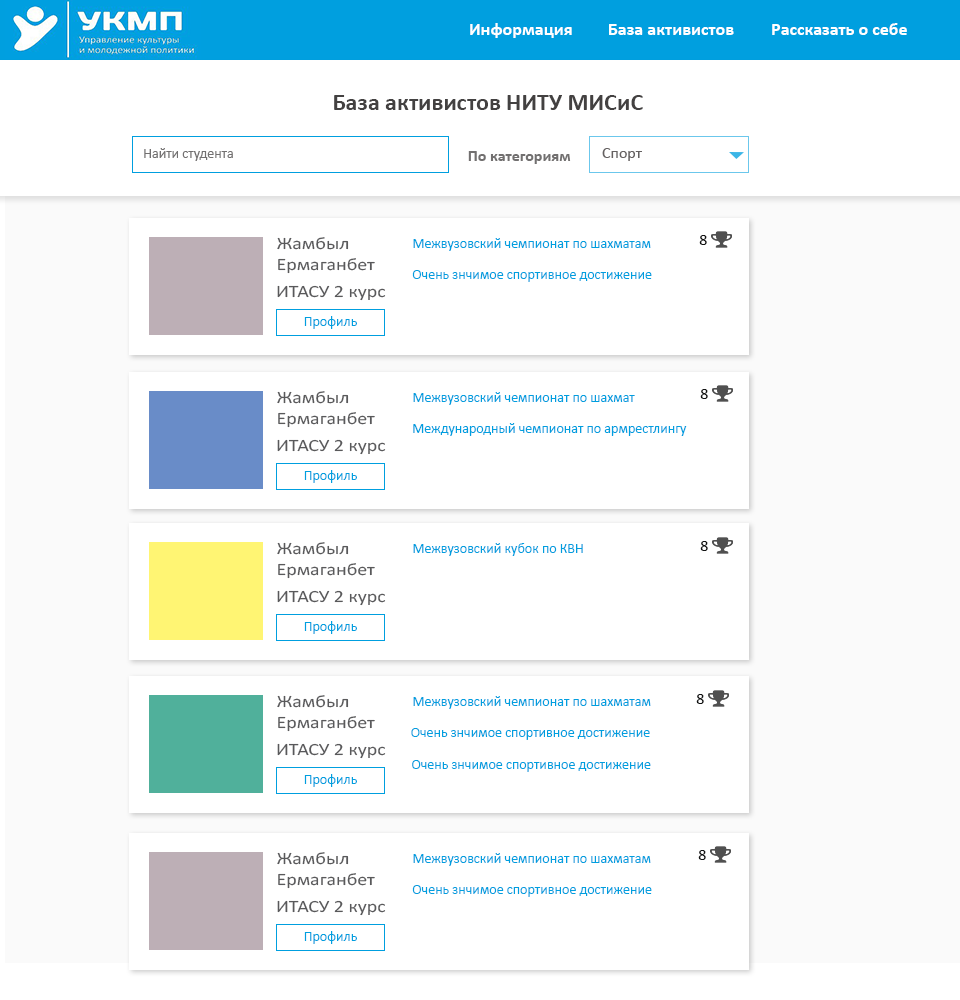
<style>
.page{position:relative;width:960px;height:1000px;background:#ffffff}
.page>*{position:absolute;margin:0}
.t1{font:18px "Calibri-Bold";color:#ffffff}
.t2{font:24px "Calibri-Bold";color:#434141}
.t3{font:14px "Calibri";color:#727070}
.t4{font:16px "Calibri";color:#656161}
.t5{font:16px "Calibri-Bold";color:#727070}
.t6{font:17.2px "Calibri";color:#59595b;scale:1.16 1}
.t7{font:14px "Calibri";color:#009fdf}
.t8{font:16px "Calibri";color:#121313}
</style>
<div class="page">
<p class="t1" style="left:470px;top:23px;width:102px;height:15px">Информация</p>
<p class="t1" style="left:609px;top:24px;width:125px;height:11px">База активистов</p>
<p class="t1" style="left:772px;top:23px;width:135px;height:12px">Рассказать о себе</p>
<p class="t2" style="left:334px;top:95px;width:309px;height:15px">База активистов НИТУ МИСиС</p>
<p class="t3" style="left:144px;top:148px;width:89px;height:13px">Найти студента</p>
<p class="t4" style="left:602px;top:148px;width:40px;height:13px">Спорт</p>
<p class="t5" style="left:468px;top:151px;width:103px;height:13px">По категориям</p>
<p class="t6" style="left:277px;top:237px;width:98px;height:37px">Жамбыл <br>Ермаганбет</p>
<p class="t7" style="left:413px;top:238px;width:238px;height:13px">Межвузовский чемпионат по шахматам</p>
<p class="t8" style="left:699px;top:235px;width:8px;height:10px">8</p>
<p class="t7" style="left:412px;top:270px;width:240px;height:12px">Очень знчимое спортивное достижение</p>
<p class="t6" style="left:277px;top:285px;width:109px;height:16px">ИТАСУ 2 курс</p>
<p class="t7" style="left:304px;top:316px;width:53px;height:13px">Профиль</p>
<p class="t8" style="left:700px;top:389px;width:8px;height:10px">8</p>
<p class="t6" style="left:277px;top:391px;width:98px;height:37px">Жамбыл <br>Ермаганбет</p>
<p class="t7" style="left:413px;top:392px;width:222px;height:13px">Межвузовский чемпионат по шахмат</p>
<p class="t7" style="left:413px;top:423px;width:274px;height:13px">Международный чемпионат по армрестлингу</p>
<p class="t6" style="left:277px;top:439px;width:109px;height:16px">ИТАСУ 2 курс</p>
<p class="t7" style="left:304px;top:470px;width:53px;height:13px">Профиль</p>
<p class="t6" style="left:277px;top:542px;width:98px;height:37px">Жамбыл <br>Ермаганбет</p>
<p class="t7" style="left:413px;top:543px;width:170px;height:13px">Межвузовский кубок по КВН</p>
<p class="t8" style="left:700px;top:541px;width:8px;height:10px">8</p>
<p class="t6" style="left:277px;top:590px;width:109px;height:16px">ИТАСУ 2 курс</p>
<p class="t7" style="left:304px;top:621px;width:53px;height:13px">Профиль</p>
<p class="t6" style="left:277px;top:695px;width:98px;height:37px">Жамбыл <br>Ермаганбет</p>
<p class="t7" style="left:413px;top:696px;width:238px;height:13px">Межвузовский чемпионат по шахматам</p>
<p class="t8" style="left:696px;top:694px;width:8px;height:10px">8</p>
<p class="t7" style="left:411px;top:728px;width:239px;height:12px">Очень знчимое спортивное достижение</p>
<p class="t6" style="left:277px;top:743px;width:109px;height:16px">ИТАСУ 2 курс</p>
<p class="t7" style="left:412px;top:760px;width:239px;height:12px">Очень знчимое спортивное достижение</p>
<p class="t7" style="left:304px;top:774px;width:53px;height:13px">Профиль</p>
<p class="t6" style="left:277px;top:852px;width:98px;height:37px">Жамбыл <br>Ермаганбет</p>
<p class="t7" style="left:413px;top:853px;width:238px;height:13px">Межвузовский чемпионат по шахматам</p>
<p class="t8" style="left:698px;top:850px;width:8px;height:10px">8</p>
<p class="t7" style="left:412px;top:885px;width:240px;height:12px">Очень знчимое спортивное достижение</p>
<p class="t6" style="left:277px;top:900px;width:109px;height:16px">ИТАСУ 2 курс</p>
<p class="t7" style="left:304px;top:931px;width:53px;height:13px">Профиль</p>
</div>
